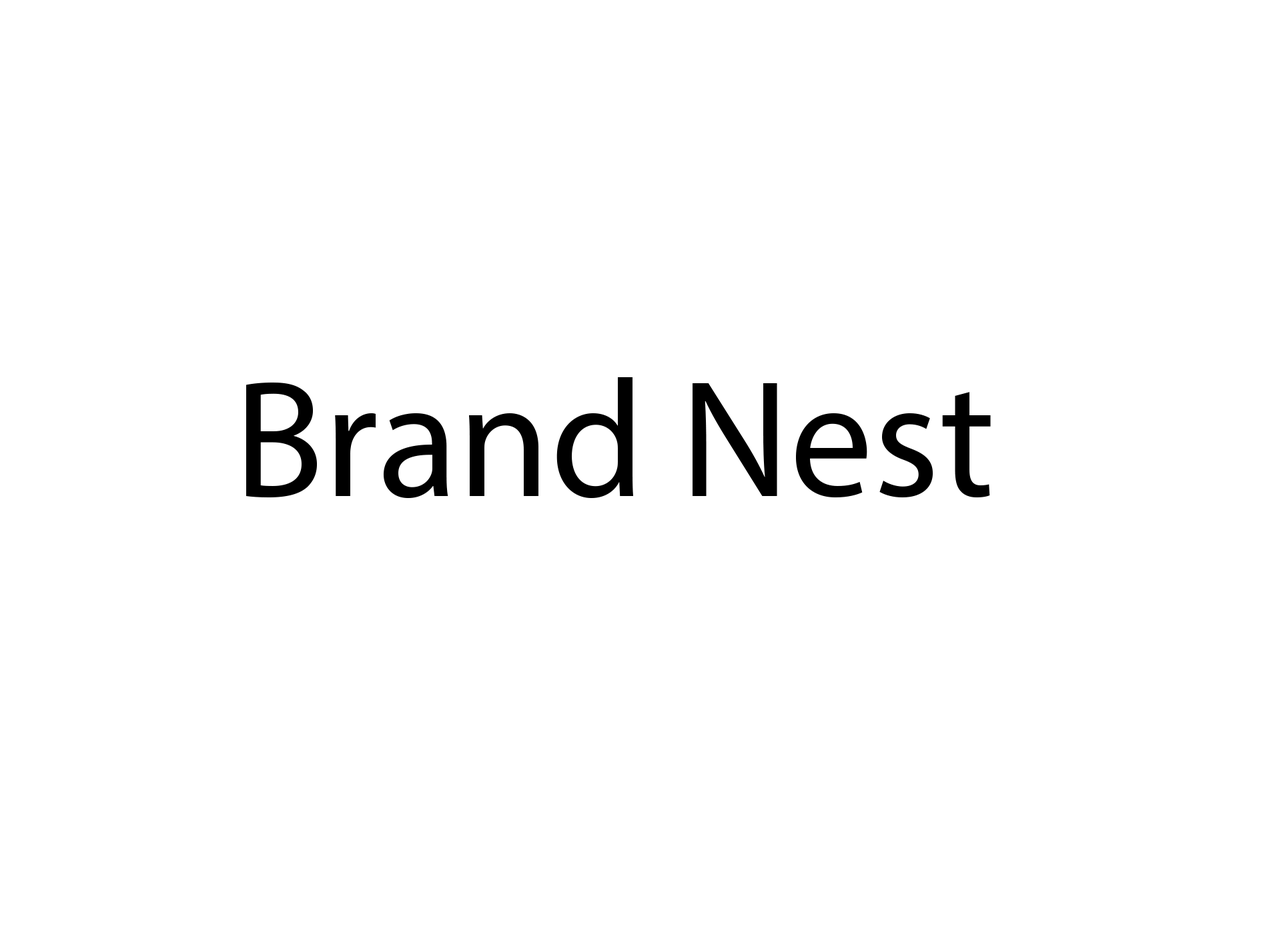
<style>
.page{position:relative;width:1261px;height:946px;background:#ffffff}
.page>*{position:absolute;margin:0}
.t1{font:166.8px "MyriadPro-Regular";color:#000000}
</style>
<div class="page">
<p class="t1" style="left:246px;top:377px;width:745px;height:121px">Brand Nest</p>
</div>
